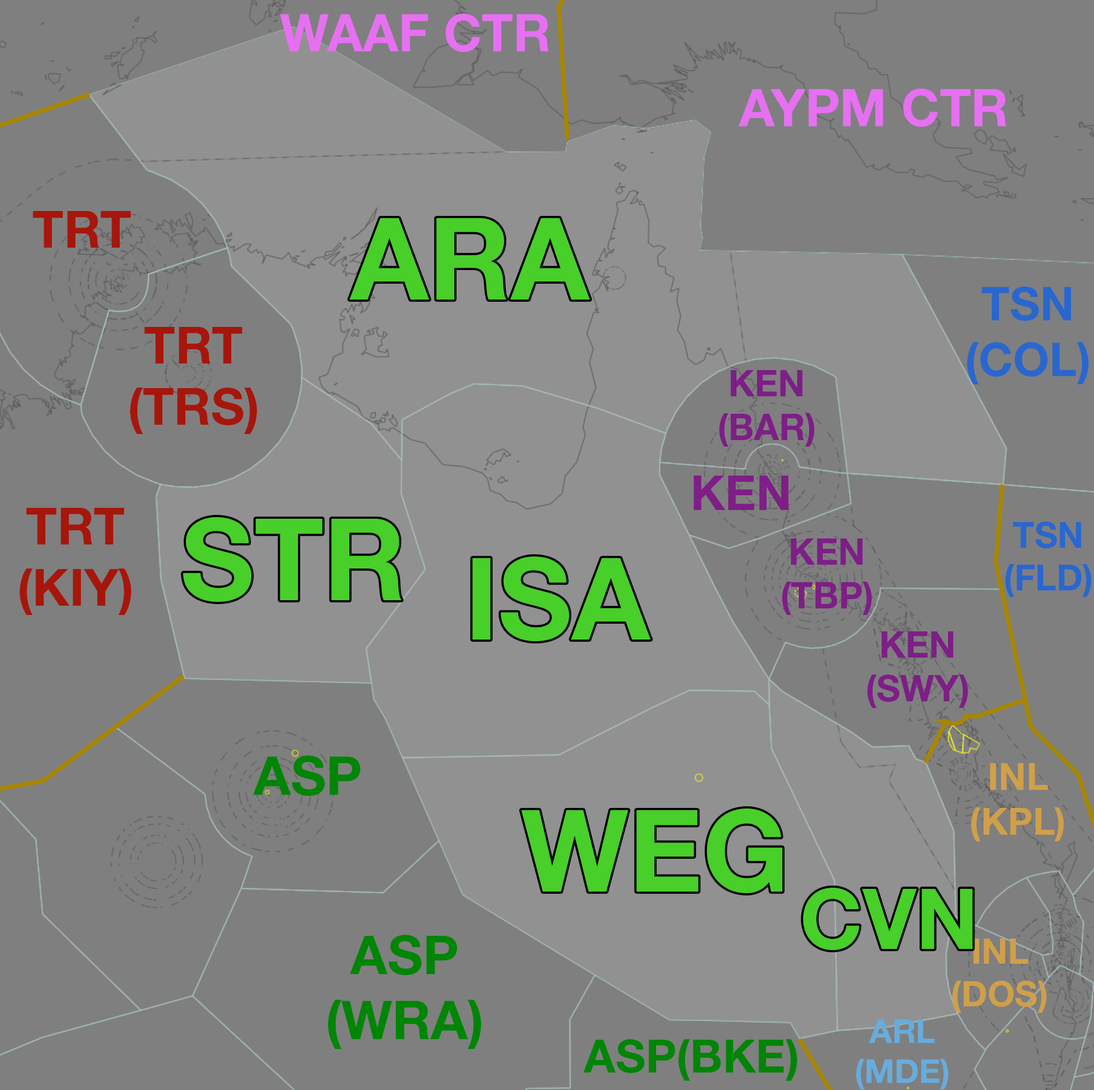
<style>
.page{position:relative;width:1094px;height:1090px;background:#7f7f7f}
.page>*{position:absolute;margin:0}
.t1{font:51.7px "HelveticaNeueLTStd-Bd";color:#e670f1}
.t2{font:51.4px "HelveticaNeueLTStd-Bd";color:#a7160b}
.t3{font:113.9px "HelveticaNeueLTStd-Bd";color:#48cf29}
.t4{font:46.5px "HelveticaNeueLTStd-Bd";color:#2967cf}
.t5{font:36.4px "HelveticaNeueLTStd-Bd";color:#7e1e87}
.t6{font:47.9px "HelveticaNeueLTStd-Bd";color:#7e1e87}
.t7{font:35.6px "HelveticaNeueLTStd-Bd";color:#2967cf}
.t8{font:54px "HelveticaNeueLTStd-Bd";color:#008506}
.t9{font:37.4px "HelveticaNeueLTStd-Bd";color:#d09f4a}
.t10{font:84.5px "HelveticaNeueLTStd-Bd";color:#48cf29}
.t11{font:35.3px "HelveticaNeueLTStd-Bd";color:#d09f4a}
.t12{font:33.2px "HelveticaNeueLTStd-Bd";color:#67acdc}
.t13{font:46.1px "HelveticaNeueLTStd-Bd";color:#008506}
</style>
<div class="page">
<p class="t1" style="left:280px;top:14px;width:269px;height:38px">WAAF CTR</p>
<p class="t1" style="left:739px;top:89px;width:267px;height:38px">AYPM CTR</p>
<p class="t2" style="left:33px;top:211px;width:98px;height:37px">TRT</p>
<p class="t3" style="left:349px;top:218px;width:241px;height:82px">ARA</p>
<p class="t4" style="left:967px;top:286px;width:121px;height:98px;text-align:center">TSN<br>(COL)</p>
<p class="t2" style="left:130px;top:327px;width:127px;height:107px;text-align:center">TRT<br>(TRS)</p>
<p class="t5" style="left:719px;top:370px;width:96px;height:77px;text-align:center">KEN<br>(BAR)</p>
<p class="t6" style="left:694px;top:476px;width:94px;height:34px">KEN</p>
<p class="t2" style="left:20px;top:508px;width:111px;height:107px;text-align:center">TRT<br>(KIY)</p>
<p class="t3" style="left:183px;top:517px;width:219px;height:85px">STR</p>
<p class="t7" style="left:1005px;top:522px;width:86px;height:75px;text-align:center">TSN<br>(FLD)</p>
<p class="t5" style="left:782px;top:538px;width:90px;height:77px;text-align:center">KEN<br>(TBP)</p>
<p class="t3" style="left:472px;top:557px;width:179px;height:84px">ISA</p>
<p class="t5" style="left:867px;top:631px;width:101px;height:77px;text-align:center">KEN<br>(SWY)</p>
<p class="t8" style="left:253px;top:756px;width:107px;height:40px">ASP</p>
<p class="t9" style="left:971px;top:763px;width:93px;height:78px;text-align:center">INL<br>(KPL)</p>
<p class="t3" style="left:521px;top:809px;width:261px;height:84px">WEG</p>
<p class="t10" style="left:803px;top:887px;width:170px;height:64px">CVN</p>
<p class="t8" style="left:328px;top:935px;width:153px;height:114px;text-align:center">ASP<br>(WRA)</p>
<p class="t11" style="left:952px;top:939px;width:94px;height:74px;text-align:center">INL<br>(DOS)</p>
<p class="t12" style="left:856px;top:1020px;width:92px;height:70px;text-align:center">ARL<br>(MDE)</p>
<p class="t13" style="left:583px;top:1039px;width:214px;height:42px">ASP(BKE)</p>
</div>
